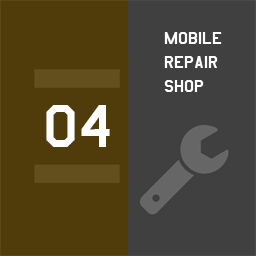
<style>
.page{position:relative;width:256px;height:256px;background:#404040}
.page>*{position:absolute;margin:0}
.t1{font:20px "AmarilloUSAF";color:#ffffff}
.t2{font:70px "AmarilloUSAF";color:#ffffff}
</style>
<div class="page">
<p class="t1" style="left:164px;top:32px;width:58px;height:60px">mobile<br>repair<br>shop</p>
<p class="t2" style="left:46px;top:105px;width:64px;height:42px">04</p>
</div>
